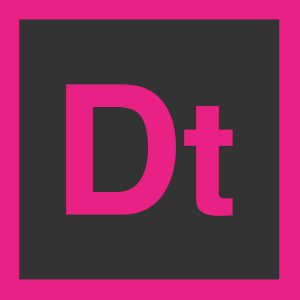
<style>
.page{position:relative;width:300px;height:300px;background:#333333}
.page>*{position:absolute;margin:0}
.t1{font:180px "Helvetica-Bold";color:#ea2184}
.t2{font:160px "Helvetica-Bold";color:#ea2184}
</style>
<div class="page">
<p class="t1" style="left:66px;top:84px;width:167px;height:132px">D<span class="t2">t</span></p>
</div>
